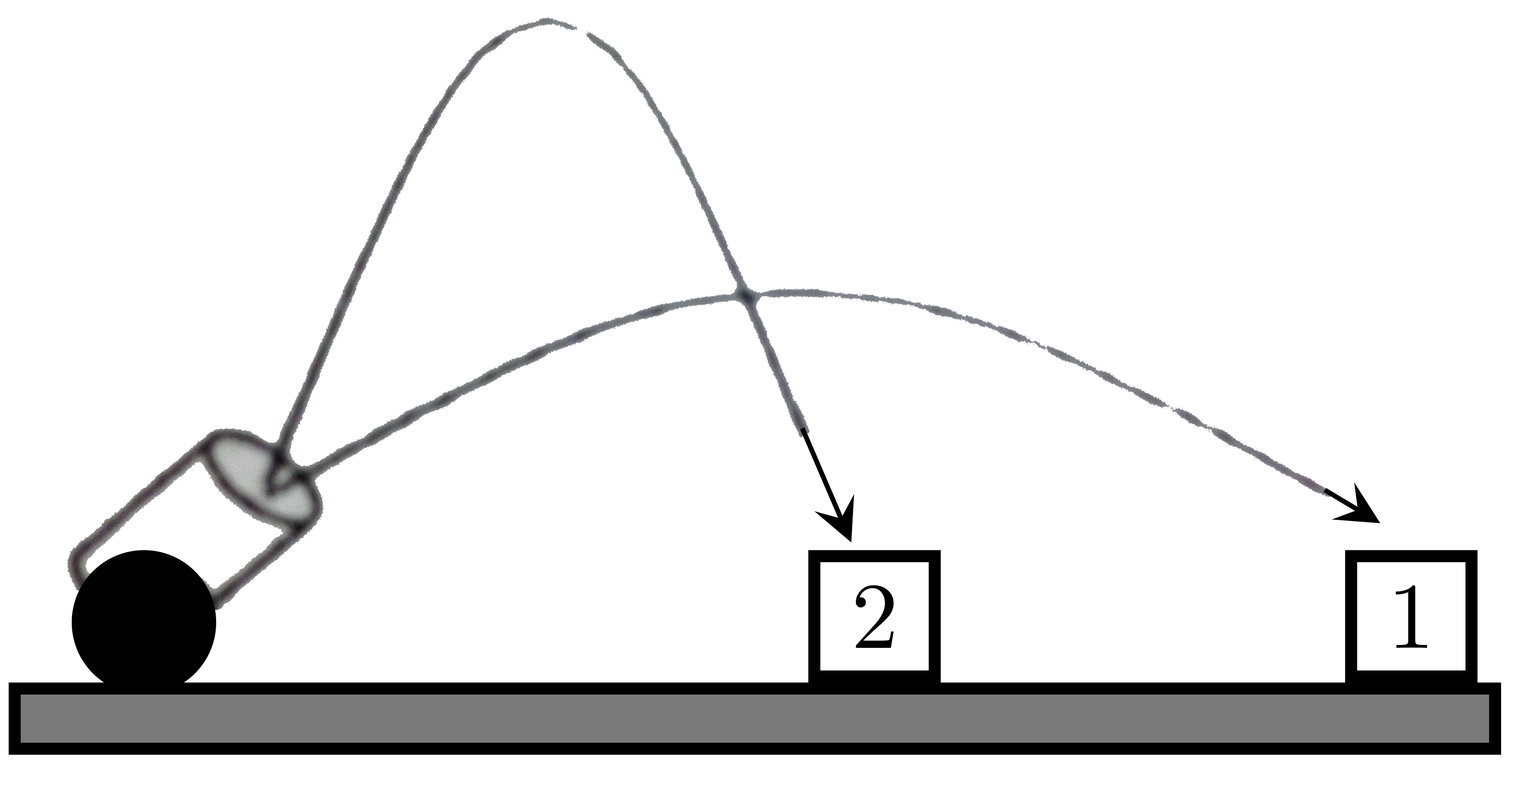
<style>
.page{position:relative;width:1517px;height:786px;background:#ffffff}
.page>*{position:absolute;margin:0}
.t1{font:94.4px "CMUSerif-Roman";color:#000000}
</style>
<div class="page">
<p class="t1" style="left:855px;top:585px;width:39px;height:63px">2</p>
<p class="t1" style="left:1396px;top:585px;width:31px;height:63px">1</p>
</div>
